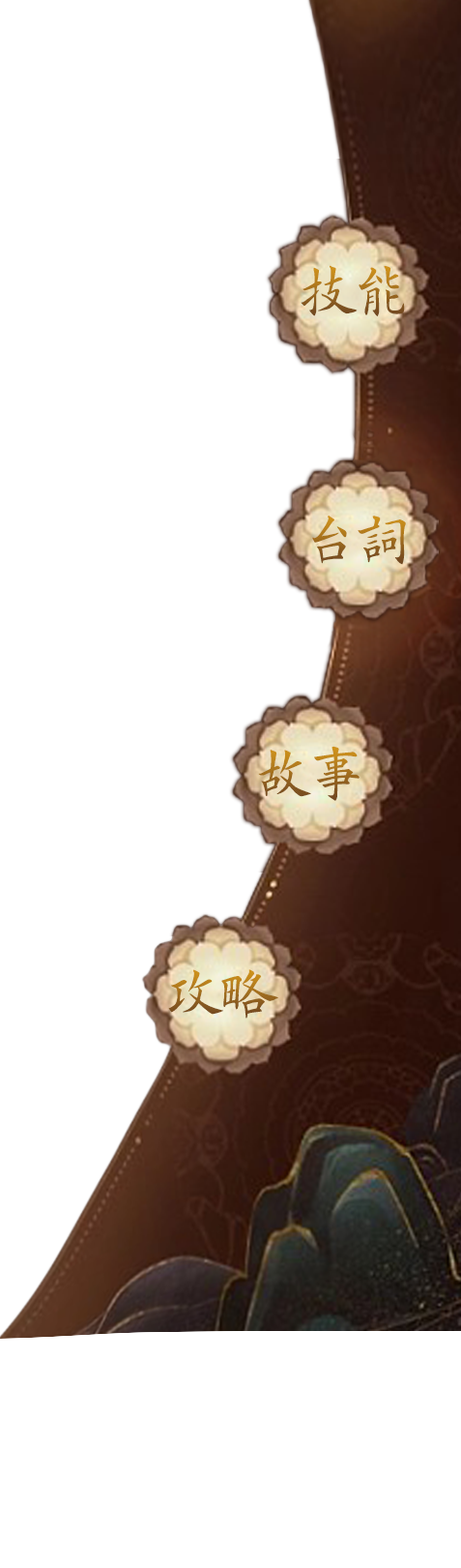
<style>
.page{position:relative;width:461px;height:1568px;background:#ffffff}
.page>*{position:absolute;margin:0}
.t1{font:58.2px "OutaiKaiStd-Light";letter-spacing:-0.1em;font-weight:bold}
</style>
<div class="page">
<p class="t1" style="left:301px;top:265px;width:104px;height:51px">技能</p>
<p class="t1" style="left:312px;top:516px;width:94px;height:49px">台詞</p>
<p class="t1" style="left:258px;top:746px;width:102px;height:55px">故事</p>
<p class="t1" style="left:168px;top:969px;width:111px;height:50px">攻略</p>
</div>
